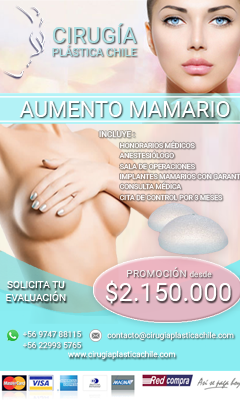
<style>
.page{position:relative;width:240px;height:400px}
.page>*{position:absolute;margin:0}
.t1{font:11.2px "Roboto-Regular";color:#abdee1}
.t2{font:22.4px "Roboto-Regular";color:#abdee1}
.t3{font:22px "Roboto-Regular";color:#ffffff}
.t4{font:10.4px "Roboto-Regular";color:#f0eaea}
.t5{font:8.1px "Roboto-Regular";color:#f0eaea}
.t6{font:10.4px "Roboto-Regular";letter-spacing:-0.01em;color:#ffffff}
.t7{font:25.5px "Roboto-Regular";color:#ffffff}
.t8{font:8.1px/10.4px "Roboto-Regular";color:#fcfcfc}
.t9{font:8.1px "Roboto-Regular";color:#fcfcfc}
.t10{font:8.1px "Roboto-Regular";color:#ffffff}
</style>
<div class="page">
<p class="t1" style="left:52px;top:23px;width:85px;height:33px;text-align:center"><span class="t2">CIRUGÍA<br></span>PLÁSTICA CHILE</p>
<p class="t3" style="left:19px;top:101px;width:211px;height:16px">AUMENTO MAMARIO</p>
<p class="t4" style="left:127px;top:267px;width:85px;height:11px">PROMOCIÓN <span class="t5">desde</span></p>
<p class="t6" style="left:6px;top:281px;width:60px;height:20px;text-align:center">SOLICITA TU<br>EVALUACIÓN</p>
<p class="t7" style="left:105px;top:280px;width:126px;height:24px">$2.150.000</p>
<p class="t8" style="left:22px;top:331px;width:60px;height:18px">+56 9747 88115<br>+56 22993 5765</p>
<p class="t9" style="left:107px;top:331px;width:127px;height:9px">contacto@cirugiaplasticachile.com</p>
<p class="t10" style="left:68px;top:350px;width:108px;height:9px">www.cirugiaplasticachile.com</p>
</div>
